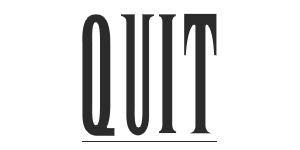
<style>
.page{position:relative;width:300px;height:150px;background:#ffffff}
.page>*{position:absolute;margin:0}
.t1{font:125px "New";color:#2b2b2b}
</style>
<div class="page">
<p class="t1" style="left:81px;top:12px;width:137px;height:125px">QUIT</p>
<p class="t1" style="left:81px;top:12px;width:137px;height:125px">QUIT</p>
</div>
